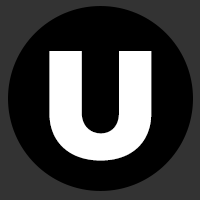
<style>
.page{position:relative;width:200px;height:200px;background:#000000}
.page>*{position:absolute;margin:0}
.t1{font:154px "Montserrat-ExtraBold";letter-spacing:-0.075em;color:#ffffff;text-transform:uppercase}
</style>
<div class="page">
<p class="t1" style="left:49px;top:51px;width:103px;height:110px">U</p>
</div>
